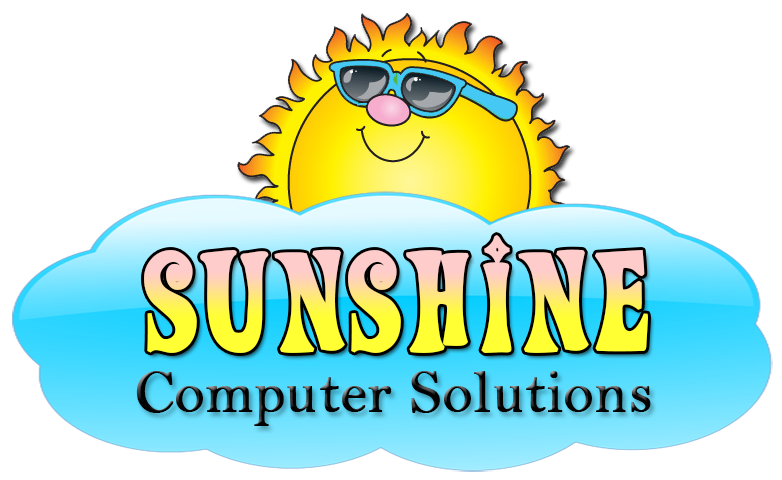
<style>
.page{position:relative;width:782px;height:480px;background:#ffffff}
.page>*{position:absolute;margin:0}
.t1{font:140px "ActionIs";font-weight:bold}
.t2{font:60px "BellMT";color:#030303;font-weight:bold}
</style>
<div class="page">
<p class="t1" style="left:144px;top:235px;width:504px;height:118px">Sunshine</p>
<p class="t2" style="left:136px;top:371px;width:515px;height:55px">Computer Solutions</p>
</div>
